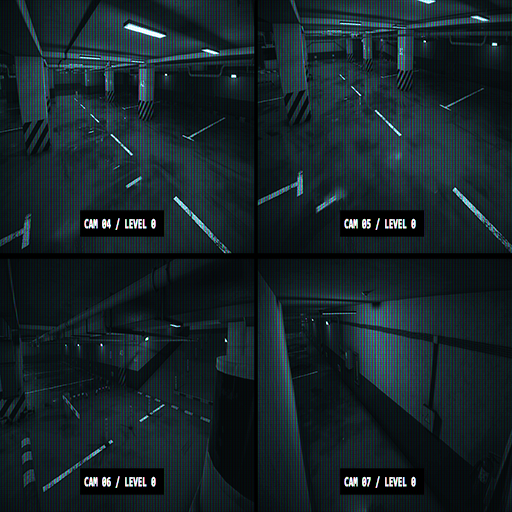
<style>
.page{position:relative;width:512px;height:512px}
.page>*{position:absolute;margin:0}
.t1{font:13.7px "Consolas-Bold";color:#ffffff;font-weight:bold;scale:0.56 1}
</style>
<div class="page">
<p class="t1" style="left:84px;top:218px;width:72px;height:12px">CAM 04 / LEVEL 0</p>
<p class="t1" style="left:344px;top:218px;width:72px;height:12px">CAM 05 / LEVEL 0</p>
<p class="t1" style="left:84px;top:476px;width:72px;height:12px">CAM 06 / LEVEL 0</p>
<p class="t1" style="left:344px;top:476px;width:72px;height:12px">CAM 07 / LEVEL 0</p>
</div>
